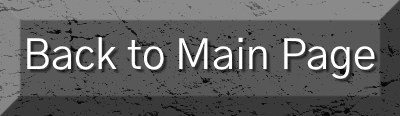
<style>
.page{position:relative;width:400px;height:116px;background:#585858}
.page>*{position:absolute;margin:0}
.t1{font:42px "GothicA1-Regular";color:#ffffff}
</style>
<div class="page">
<p class="t1" style="left:27px;top:37px;width:348px;height:42px">Back to Main Page</p>
</div>
